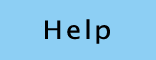
<style>
.page{position:relative;width:156px;height:60px;background:#8dcff4}
.page>*{position:absolute;margin:0}
.t1{font:25px "LucidaSansUnicode";letter-spacing:0.26em;color:#000000;scale:1.11 1}
</style>
<div class="page">
<p class="t1" style="left:45px;top:19px;width:65px;height:25px">Help</p>
</div>
